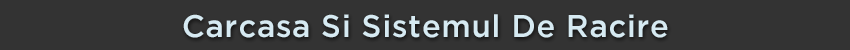
<style>
.page{position:relative;width:850px;height:50px;background:#333333}
.page>*{position:absolute;margin:0}
.t1{font:31.4px "GothamMedium";letter-spacing:0.025em;color:#d6eaf2}
</style>
<div class="page">
<p class="t1" style="left:183px;top:14px;width:485px;height:24px">Carcasa Si Sistemul De Racire</p>
</div>
